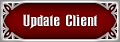
<style>
.page{position:relative;width:120px;height:42px}
.page>*{position:absolute;margin:0}
.t1{font:16px "Ravenscroft";color:#ffffff;scale:1.8 1}
</style>
<div class="page">
<p class="t1" style="left:23px;top:14px;width:74px;height:15px">Update Client</p>
</div>
